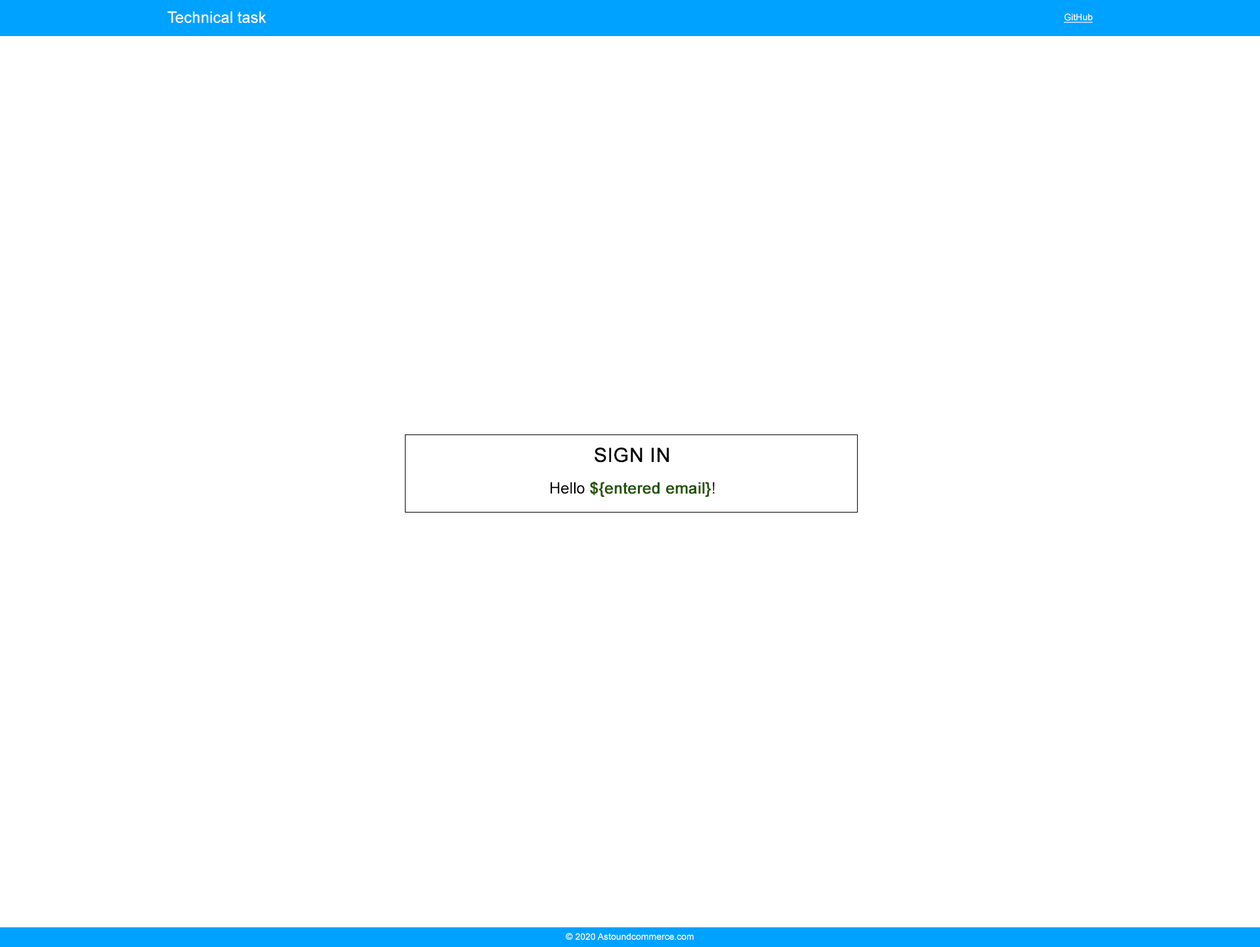
<style>
.page{position:relative;width:1260px;height:947px;background:#ffffff}
.page>*{position:absolute;margin:0}
.t1{font:15.7px "ArialMT";color:#ffffff}
.t2{font:9.2px "ArialMT";color:#ffffff;text-decoration:underline}
.t3{font:15.7px/15.7px "ArialMT";color:#225400;font-weight:bold}
.t4{font:19.7px/39.4px "ArialMT";color:#000000;text-transform:uppercase;font-weight:bold}
.t5{font:15.7px/15.7px "ArialMT";color:#000000}
.t6{font:9.2px "ArialMT";color:#ffffff}
</style>
<div class="page">
<p class="t1" style="left:167px;top:11px;width:99px;height:12px">Technical task</p>
<p class="t2" style="left:1063px;top:13px;width:29px;height:10px">GitHub</p>
<p class="t3" style="left:550px;top:447px;width:164px;height:50px;text-align:center"><span class="t4">Sign In<br><br></span><span class="t5">Hello </span>${entered email}<span class="t5">!</span></p>
<p class="t6" style="left:566px;top:932px;width:127px;height:7px">© 2020 Astoundcommerce.com</p>
</div>
